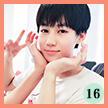
<style>
.page{position:relative;width:108px;height:108px}
.page>*{position:absolute;margin:0}
.t1{font:12px "DFNMing-XB-HK-BF";letter-spacing:0.1em;color:#000000;font-weight:bold}
</style>
<div class="page">
<p class="t1" style="left:87px;top:88px;width:13px;height:11px">16</p>
</div>
